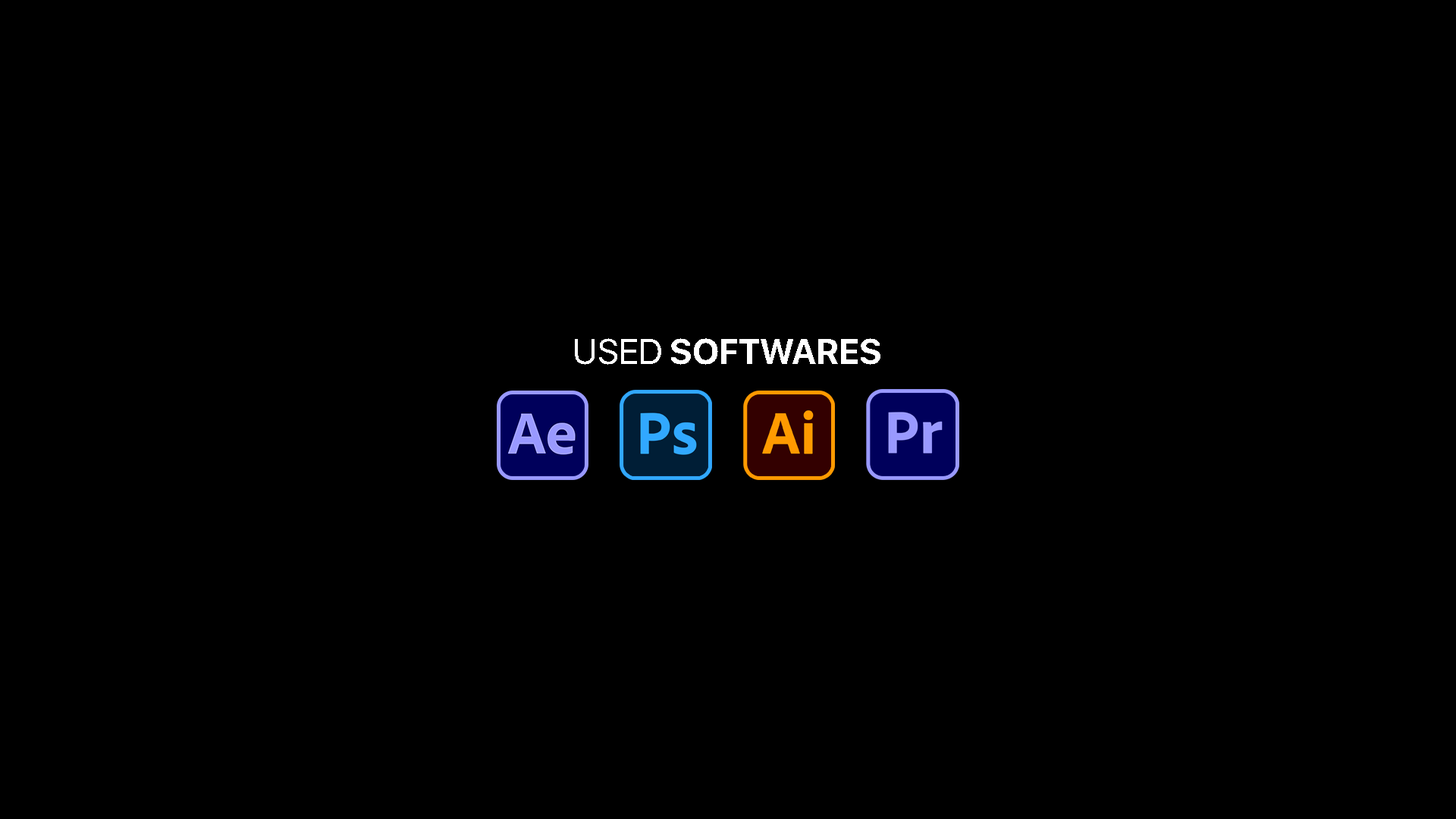
<style>
.page{position:relative;width:1456px;height:819px;background:#000000}
.page>*{position:absolute;margin:0}
.t1{font:35.5px "SFProDisplay-Bold";color:#ffffff;text-transform:uppercase}
.t2{font:35.5px "SFProDisplay-Regular";color:#ffffff;text-transform:uppercase}
</style>
<div class="page">
<p class="t1" style="left:575px;top:338px;width:305px;height:27px"><span class="t2">Used </span>Softwares</p>
</div>
